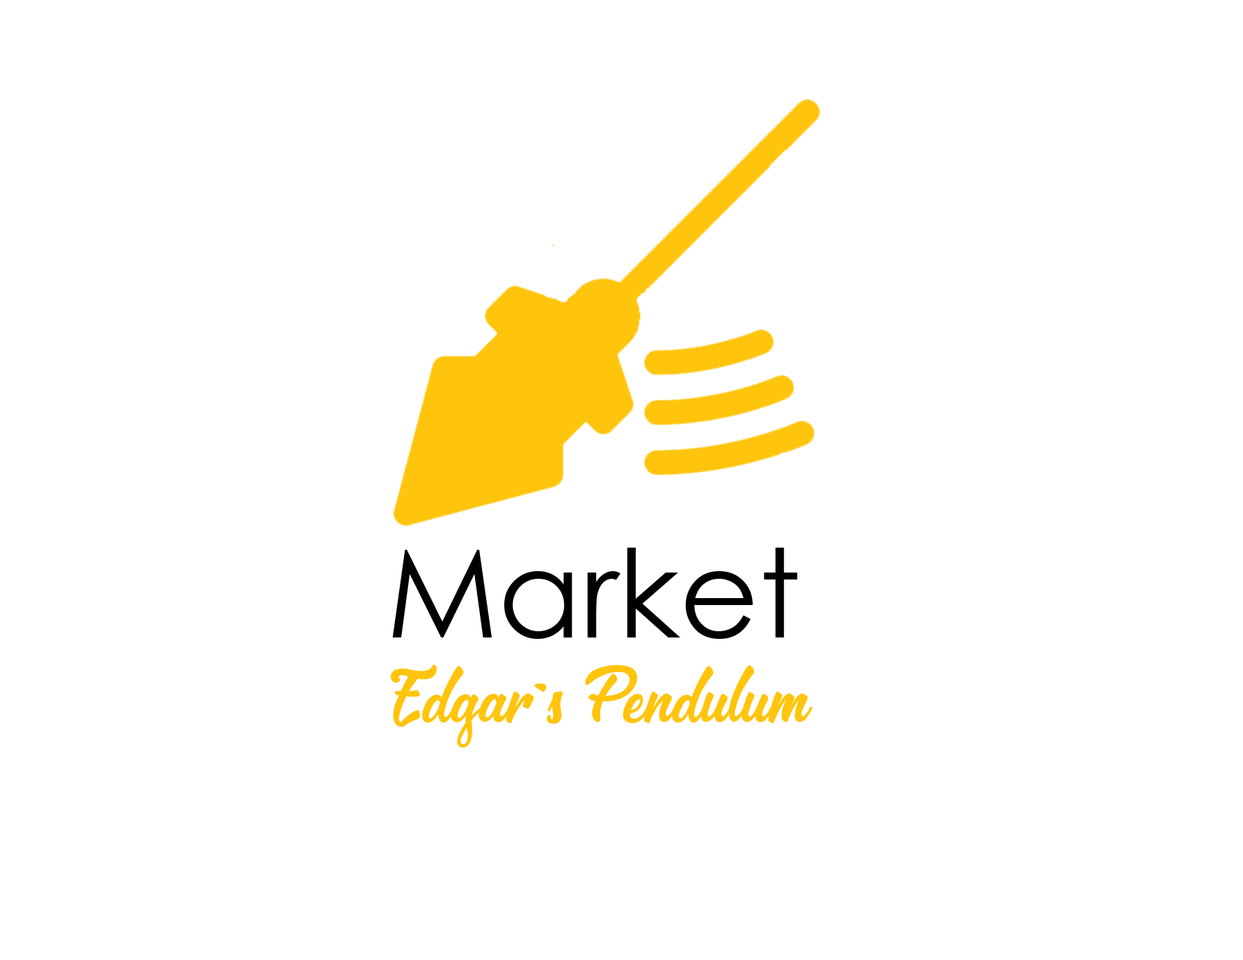
<style>
.page{position:relative;width:1243px;height:960px;background:#ffffff}
.page>*{position:absolute;margin:0}
.t1{font:121.9px "CenturyGothic";color:#000000}
.t2{font:63.3px "&Matchmaker";color:#ffc40c}
.t3{font:63.3px "&Matchmaker";color:#ffc40c;text-transform:uppercase}
</style>
<div class="page">
<p class="t1" style="left:392px;top:547px;width:405px;height:92px">Market</p>
<p class="t2" style="left:390px;top:664px;width:423px;height:84px"><span class="t3">E</span>dgar´s <span class="t3">P</span>endulum</p>
</div>
